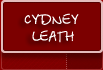
<style>
.page{position:relative;width:103px;height:70px;background:#7c0000}
.page>*{position:absolute;margin:0}
.t1{font:14px "BetinaScript";color:#ffffff}
.t2{font:11px "Tahoma";color:#ffffff}
</style>
<div class="page">
<p class="t1" style="left:24px;top:13px;width:55px;height:30px"><span class="t2">  </span>CYDNEY<br>   LEATH</p>
</div>
